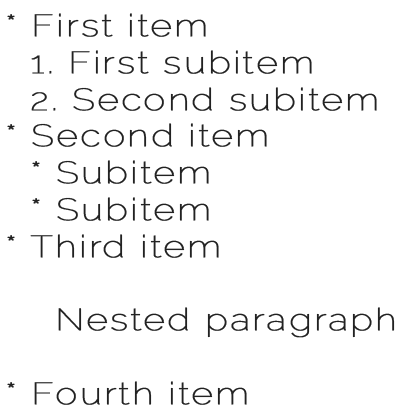
<style>
.page{position:relative;width:400px;height:410px;background:#ffffff}
.page>*{position:absolute;margin:0}
.t1{font:30.7px "Raleway-Thin";letter-spacing:0.05em;color:#222222;font-weight:bold;scale:1.2 1}
</style>
<div class="page">
<p class="t1" style="left:7px;top:13px;width:388px;height:392px">* First item<br>  1. First subitem<br>  2. Second subitem<br>* Second item<br>  * Subitem<br>  * Subitem<br>* Third item<br><br>    Nested paragraph<br><br>* Fourth item</p>
</div>
